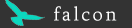
<style>
.page{position:relative;width:132px;height:28px;background:#333333}
.page>*{position:absolute;margin:0}
.t1{font:20px "Sylfaen";letter-spacing:0.12em;color:#ffffff}
</style>
<div class="page">
<p class="t1" style="left:54px;top:6px;width:63px;height:15px">falcon</p>
</div>
